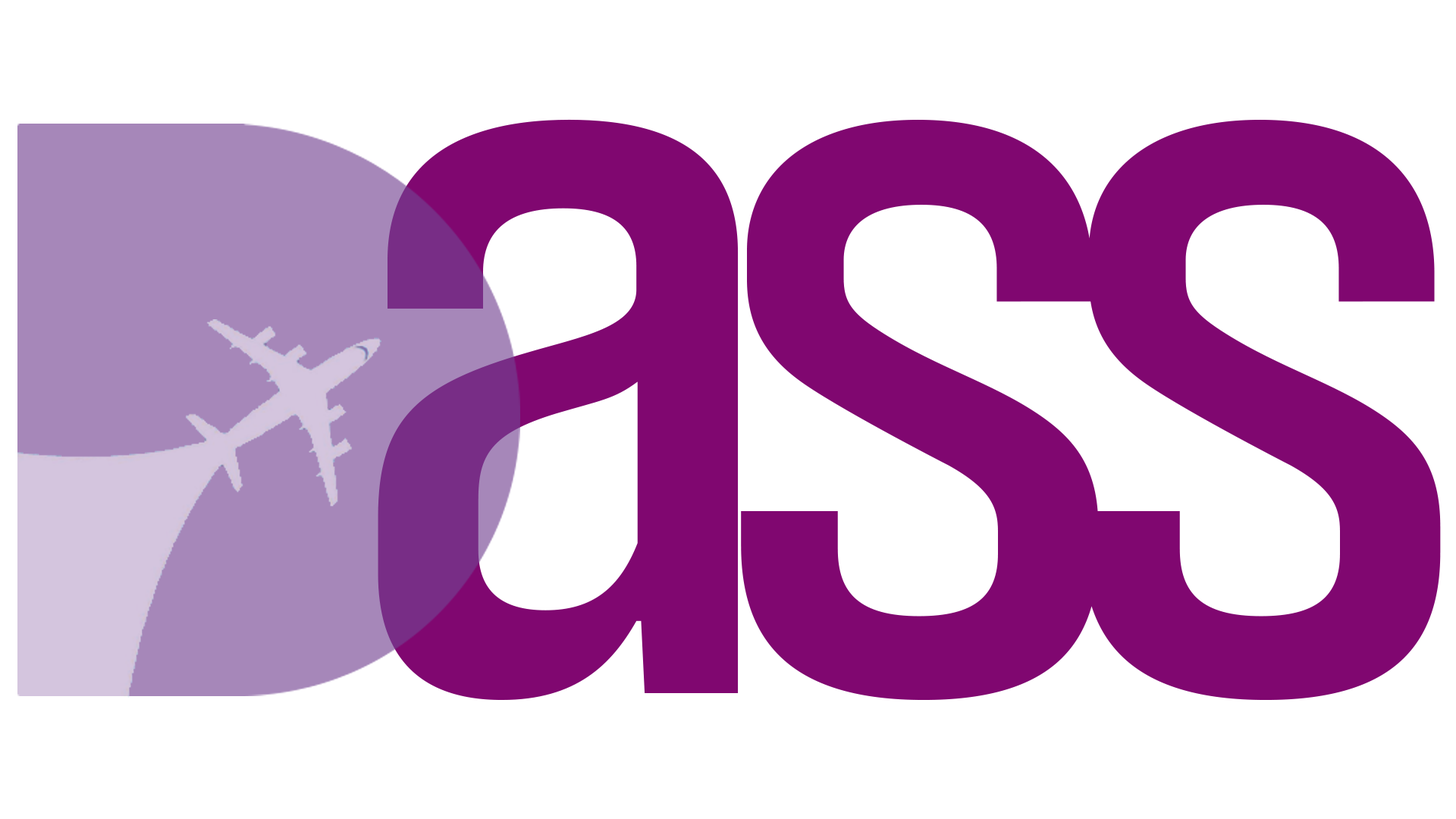
<style>
.page{position:relative;width:1456px;height:819px;background:#ffffff}
.page>*{position:absolute;margin:0}
.t1{font:1179.8px "CoolveticaCondensedRg-Regular";letter-spacing:-0.05em;color:#800770}
</style>
<div class="page">
<p class="t1" style="left:378px;top:119px;width:1063px;height:581px">ass</p>
</div>
